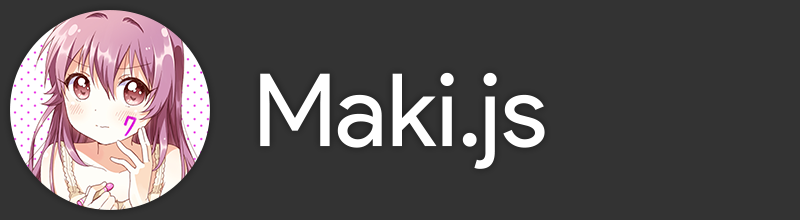
<style>
.page{position:relative;width:800px;height:220px;background:#333333}
.page>*{position:absolute;margin:0}
.t1{font:101px "ProductSans-Regular";color:#ffffff}
</style>
<div class="page">
<p class="t1" style="left:260px;top:72px;width:285px;height:97px">Maki.js</p>
</div>
